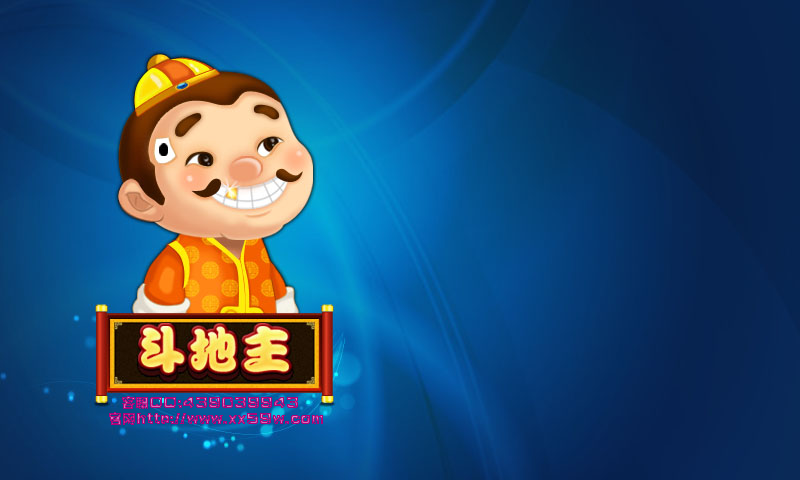
<style>
.page{position:relative;width:800px;height:480px}
.page>*{position:absolute;margin:0}
.t1{font:14px "PiliEG-Ultra-GB";color:#ae037b}
</style>
<div class="page">
<p class="t1" style="left:122px;top:396px;width:176px;height:13px">客服QQ:439039943</p>
<p class="t1" style="left:109px;top:412px;width:214px;height:13px">官网http://www.xx59w.com</p>
</div>
